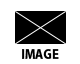
<style>
.page{position:relative;width:80px;height:64px;background:#ffffff}
.page>*{position:absolute;margin:0}
.t1{font:14px "MyriadPro-Bold";color:#000000;scale:0.9 1}
</style>
<div class="page">
<p class="t1" style="left:22px;top:49px;width:37px;height:10px">IMAGE</p>
</div>
